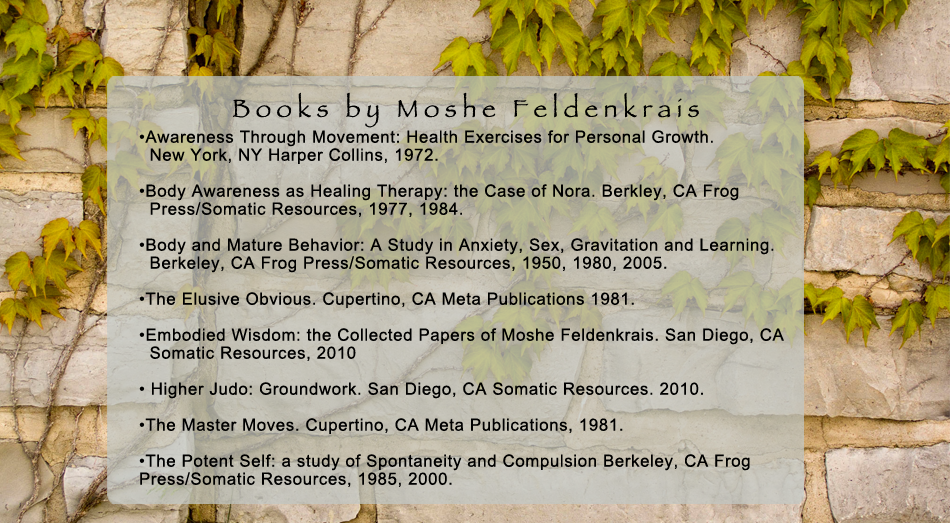
<style>
.page{position:relative;width:950px;height:523px}
.page>*{position:absolute;margin:0}
.t1{font:43.3px "Papyrus";letter-spacing:0.22em;color:#000000}
.t2{font:28.7px/18px "ArialMT";letter-spacing:0.04em;color:#000000}
</style>
<div class="page">
<p class="t1" style="left:233px;top:92px;width:466px;height:36px">Books by Moshe Feldenkrais</p>
<p class="t2" style="left:139px;top:130px;width:645px;height:357px">•Awareness Through Movement: Health Exercises for Personal Growth. <br>  New York, NY Harper Collins, 1972.<br><br>•Body Awareness as Healing Therapy: the Case of Nora. Berkley, CA Frog <br>  Press/Somatic Resources, 1977, 1984.<br><br>•Body and Mature Behavior: A Study in Anxiety, Sex, Gravitation and Learning. <br>  Berkeley, CA Frog Press/Somatic Resources, 1950, 1980, 2005.<br><br>•The Elusive Obvious. Cupertino, CA Meta Publications 1981.<br><br>•Embodied Wisdom: the Collected Papers of Moshe Feldenkrais. San Diego, CA <br>  Somatic Resources, 2010<br><br>• Higher Judo: Groundwork. San Diego, CA Somatic Resources. 2010.<br><br>•The Master Moves. Cupertino, CA Meta Publications, 1981.<br><br>•The Potent Self: a study of Spontaneity and Compulsion Berkeley, CA Frog <br>Press/Somatic Resources, 1985, 2000.</p>
</div>
